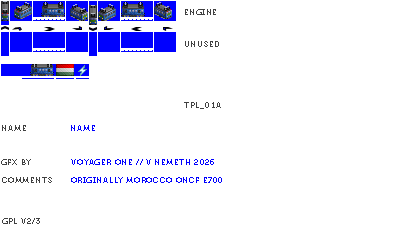
<style>
.page{position:relative;width:400px;height:230px;background:#ffffff}
.page>*{position:absolute;margin:0}
.t1{font:8px "Museo700-Regular";letter-spacing:0.075em;color:#404040;text-transform:uppercase}
.t2{font:8px "Museo700-Regular";letter-spacing:0.075em;color:#0000ff;text-transform:uppercase}
</style>
<div class="page">
<p class="t1" style="left:185px;top:9px;width:31px;height:6px">engine</p>
<p class="t1" style="left:185px;top:41px;width:34px;height:6px">unused</p>
<p class="t1" style="left:184px;top:102px;width:37px;height:7px">tpl_01a</p>
<p class="t1" style="left:2px;top:125px;width:24px;height:6px">name</p>
<p class="t2" style="left:71px;top:125px;width:24px;height:6px">name</p>
<p class="t1" style="left:1px;top:159px;width:30px;height:6px">gfx by</p>
<p class="t2" style="left:71px;top:159px;width:143px;height:6px">voyager one // v nemeth 2026</p>
<p class="t1" style="left:2px;top:177px;width:50px;height:6px">comments</p>
<p class="t2" style="left:71px;top:177px;width:151px;height:6px">originally morocco oncf e700</p>
<p class="t1" style="left:2px;top:218px;width:38px;height:6px">gpl v2/3</p>
</div>
